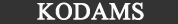
<style>
.page{position:relative;width:178px;height:24px;background:#333333}
.page>*{position:absolute;margin:0}
.t1{font:24px "IskoolaPota";color:#fcfafa;font-weight:bold}
</style>
<div class="page">
<p class="t1" style="left:37px;top:2px;width:107px;height:18px">KODAMS</p>
</div>
